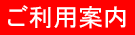
<style>
.page{position:relative;width:135px;height:35px;background:#ff0000}
.page>*{position:absolute;margin:0}
.t1{font:25px "MS-PGothic";color:#ffffff}
</style>
<div class="page">
<p class="t1" style="left:8px;top:5px;width:118px;height:24px">ご利用案内</p>
</div>
